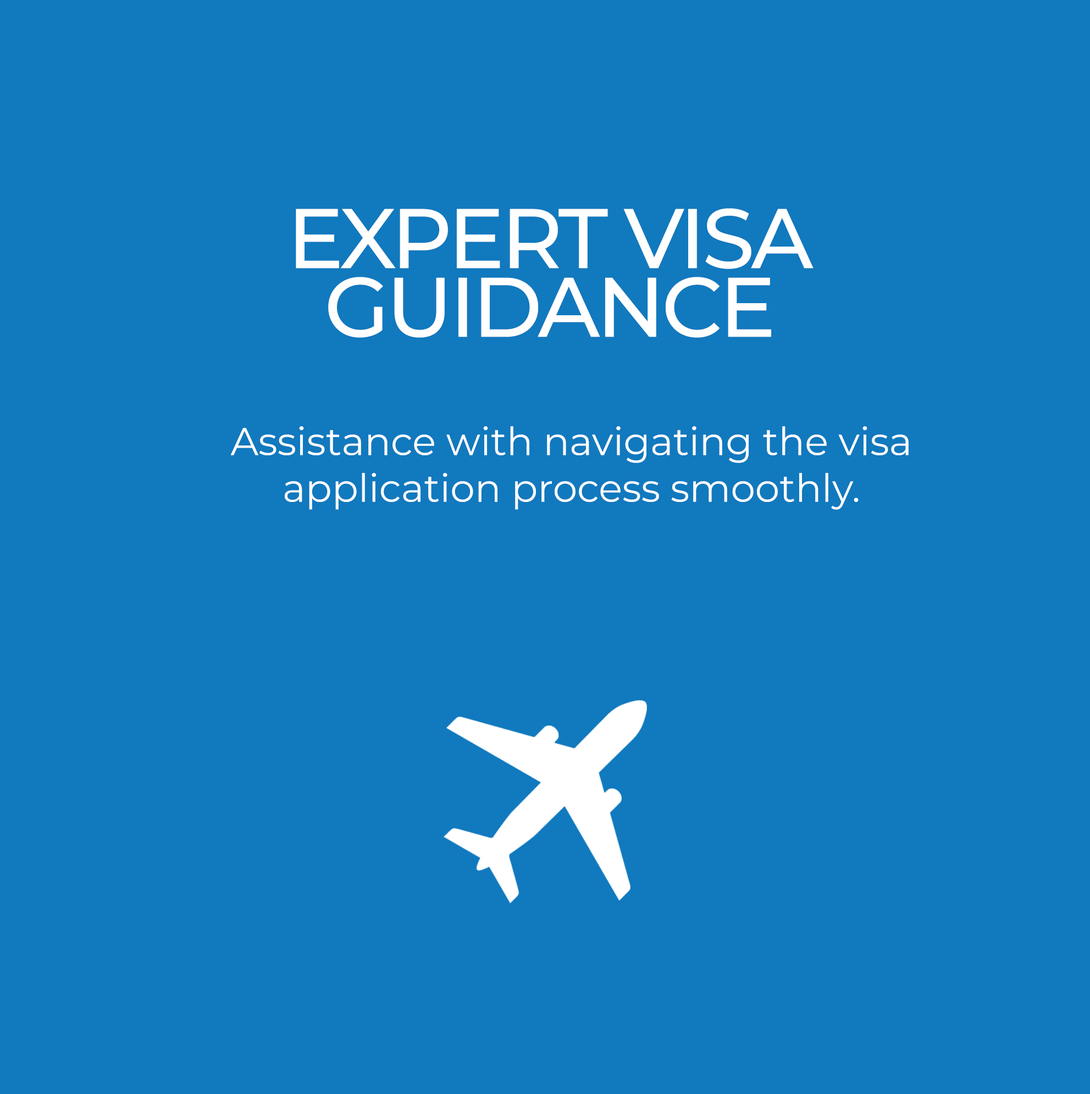
<style>
.page{position:relative;width:1090px;height:1094px;background:#1179be}
.page>*{position:absolute;margin:0}
.t1{font:84.3px/68.7px "Montserrat-Medium";letter-spacing:-0.04em;color:#ffffff;text-transform:uppercase}
.t2{font:38.9px "Montserrat-Regular";color:#ffffff}
</style>
<div class="page">
<p class="t1" style="left:296px;top:208px;width:517px;height:130px;text-align:center">Expert Visa<br>Guidance</p>
<p class="t2" style="left:230px;top:426px;width:678px;height:84px;text-align:center">Assistance with navigating the visa application process smoothly.</p>
</div>
